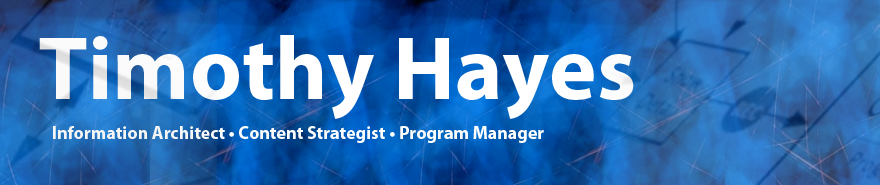
<style>
.page{position:relative;width:880px;height:185px}
.page>*{position:absolute;margin:0}
.t1{font:90px "MyriadPro-Bold";color:#ffffff}
.t2{font:18px "MyriadPro-Bold";color:#ffffff}
</style>
<div class="page">
<p class="t1" style="left:39px;top:35px;width:595px;height:84px">Timothy Hayes</p>
<p class="t2" style="left:53px;top:126px;width:491px;height:17px">Information Architect • Content Strategist • Program Manager</p>
</div>
